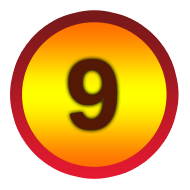
<style>
.page{position:relative;width:190px;height:190px;background:#ffffff}
.page>*{position:absolute;margin:0}
.t1{font:100px "Arimo-Bold";color:#531904}
</style>
<div class="page">
<p class="t1" style="left:68px;top:59px;width:49px;height:71px">9</p>
</div>
